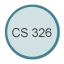
<style>
.page{position:relative;width:64px;height:64px;background:#d0e0e3}
.page>*{position:absolute;margin:0}
.t1{font:12px "ArialMT";color:#3f3f3f}
</style>
<div class="page">
<p class="t1" style="left:12px;top:28px;width:40px;height:10px">CS 326</p>
</div>
